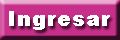
<style>
.page{position:relative;width:120px;height:40px;background:#c82f8a}
.page>*{position:absolute;margin:0}
.t1{font:20.8px "Arial-Black";letter-spacing:0.05em;color:#ffffff}
</style>
<div class="page">
<p class="t1" style="left:9px;top:11px;width:101px;height:19px">Ingresar</p>
</div>
